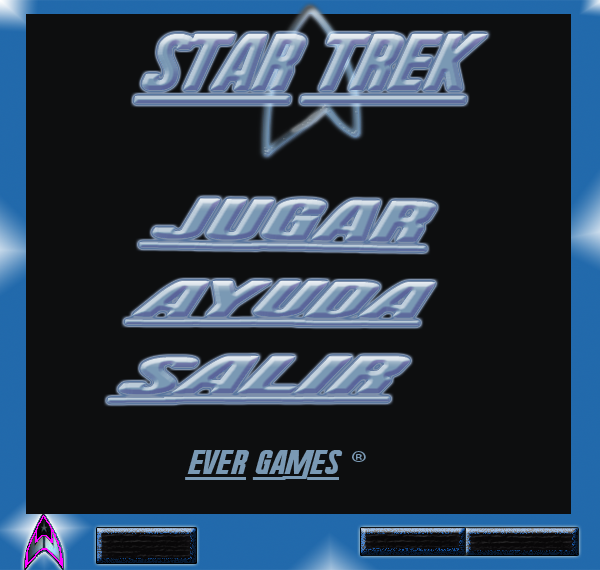
<style>
.page{position:relative;width:600px;height:570px;background:#0d0e0f}
.page>*{position:absolute;margin:0}
.t1{font:79.1px "RadiumCorp";scale:1.34 1}
.t2{font:56px "RadiumCorp";scale:2.74 1}
.t3{font:49.8px "RadiumCorp";scale:3.14 1}
.t4{font:52.2px "RadiumCorp";scale:3.35 1}
.t5{font:33.1px "RadiumCorp";color:#7a99b4;scale:1.25 1}
.t6{font:33.1px "MyriadPro-Regular";color:#7a99b4;scale:1.25 1}
</style>
<div class="page">
<p class="t1" style="left:134px;top:34px;width:354px;height:70px">star trek</p>
<p class="t2" style="left:139px;top:198px;width:298px;height:53px;rotate:1deg">jugar</p>
<p class="t3" style="left:124px;top:281px;width:312px;height:45px">ayuda</p>
<p class="t4" style="left:107px;top:356px;width:303px;height:47px">salir</p>
<p class="t5" style="left:185px;top:450px;width:181px;height:30px">ever games <span class="t6">®</span></p>
</div>
